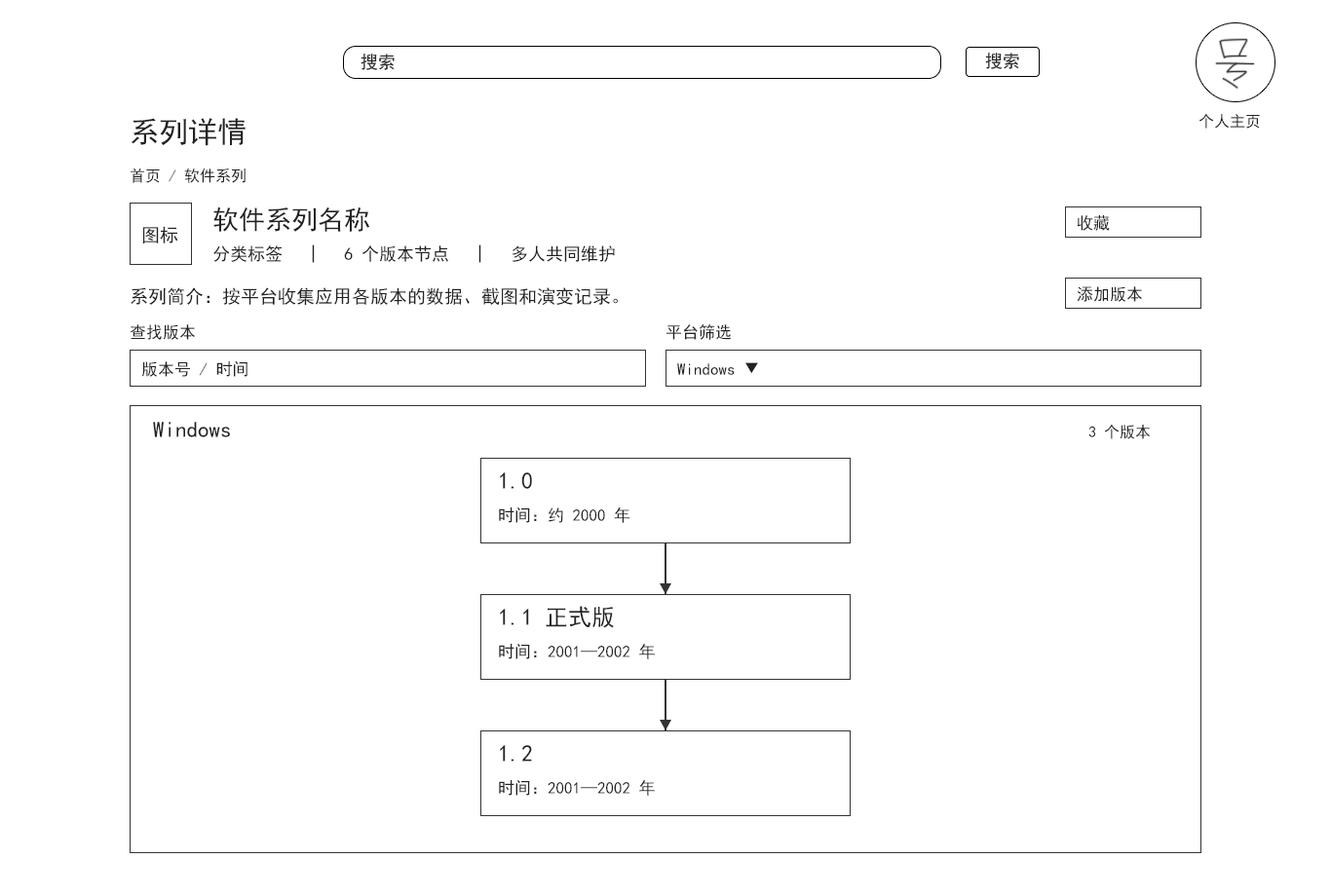
<style>
.page{position:relative;width:1331px;height:896px;background:#ffffff}
.page>*{position:absolute;margin:0}
.t1{font:17.5px "SimHei";color:#282828}
.t2{font:15.6px "SimHei";color:#222222}
.t3{font:29.2px "SimHei";color:#222222}
.t4{font:26.3px "SimHei";color:#222222}
.t5{font:16.6px "SimHei";color:#222222}
.t6{font:18.5px "SimHei";color:#222222}
.t7{font:17.5px "SimHei";color:#222222}
.t8{font:22.4px "SimHei";color:#222222}
.t9{font:23.4px "SimHei";color:#222222}
</style>
<div class="page">
<p class="t1" style="left:360px;top:54px;width:35px;height:16px">搜索</p>
<p class="t1" style="left:985px;top:53px;width:34px;height:16px">搜索</p>
<p class="t2" style="left:1198px;top:113px;width:61px;height:16px">个人主页</p>
<p class="t3" style="left:131px;top:118px;width:114px;height:28px">系列详情</p>
<p class="t2" style="left:131px;top:168px;width:114px;height:15px">首页 / 软件系列</p>
<p class="t4" style="left:213px;top:207px;width:156px;height:25px">软件系列名称</p>
<p class="t5" style="left:1076px;top:215px;width:33px;height:16px">收藏</p>
<p class="t6" style="left:142px;top:226px;width:36px;height:18px">图标</p>
<p class="t7" style="left:213px;top:244px;width:402px;height:19px">分类标签   |   6 个版本节点   |   多人共同维护</p>
<p class="t6" style="left:131px;top:287px;width:487px;height:18px">系列简介：按平台收集应用各版本的数据、截图和演变记录。</p>
<p class="t5" style="left:1076px;top:286px;width:67px;height:16px">添加版本</p>
<p class="t5" style="left:130px;top:324px;width:66px;height:16px">查找版本</p>
<p class="t5" style="left:666px;top:324px;width:65px;height:16px">平台筛选</p>
<p class="t5" style="left:142px;top:361px;width:105px;height:16px">版本号 / 时间</p>
<p class="t5" style="left:677px;top:362px;width:81px;height:13px">Windows ▼</p>
<p class="t8" style="left:153px;top:422px;width:77px;height:15px">Windows</p>
<p class="t2" style="left:1088px;top:424px;width:61px;height:15px">3 个版本</p>
<p class="t9" style="left:500px;top:472px;width:32px;height:17px">1.0</p>
<p class="t5" style="left:499px;top:507px;width:131px;height:16px">时间：约 2000 年</p>
<p class="t9" style="left:500px;top:606px;width:114px;height:22px">1.1 正式版</p>
<p class="t5" style="left:499px;top:644px;width:156px;height:15px">时间：2001—2002 年</p>
<p class="t9" style="left:500px;top:745px;width:32px;height:17px">1.2</p>
<p class="t5" style="left:499px;top:780px;width:156px;height:16px">时间：2001—2002 年</p>
</div>
